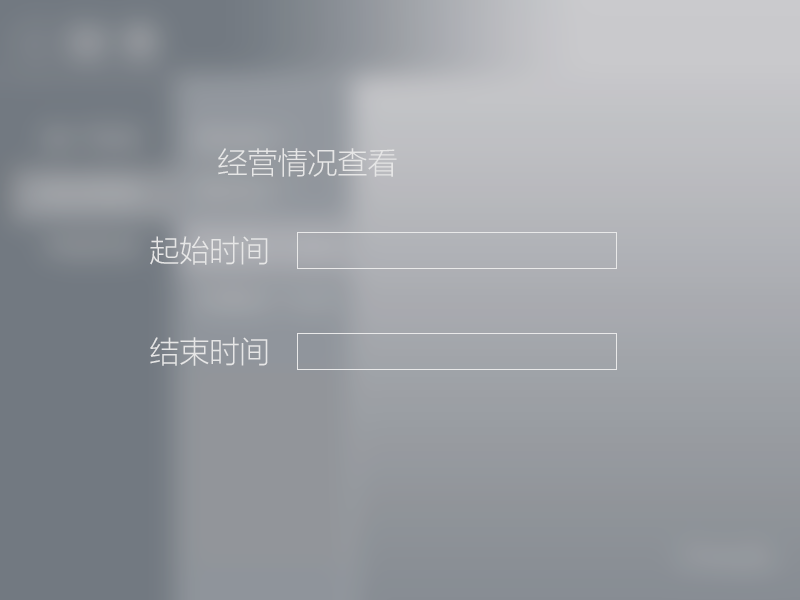
<style>
.page{position:relative;width:800px;height:600px}
.page>*{position:absolute;margin:0}
.t1{font:30px "MicrosoftYaHeiLight";color:#e6e6e6}
</style>
<div class="page">
<p class="t1" style="left:218px;top:148px;width:179px;height:29px">经营情况查看</p>
<p class="t1" style="left:150px;top:236px;width:118px;height:29px">起始时间</p>
<p class="t1" style="left:150px;top:337px;width:118px;height:29px">结束时间</p>
</div>
